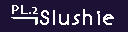
<style>
.page{position:relative;width:128px;height:32px;background:#1d1135}
.page>*{position:absolute;margin:0}
.t1{font:12px "BonvenoCF-Light";letter-spacing:0.005em;color:#ffffff;font-weight:bold}
.t2{font:18px "BonvenoCF-Light";letter-spacing:0.005em;color:#ffffff;font-weight:bold}
</style>
<div class="page">
<p class="t1" style="left:12px;top:5px;width:26px;height:9px">PL.2</p>
<p class="t2" style="left:40px;top:9px;width:74px;height:16px">Slushie</p>
</div>
